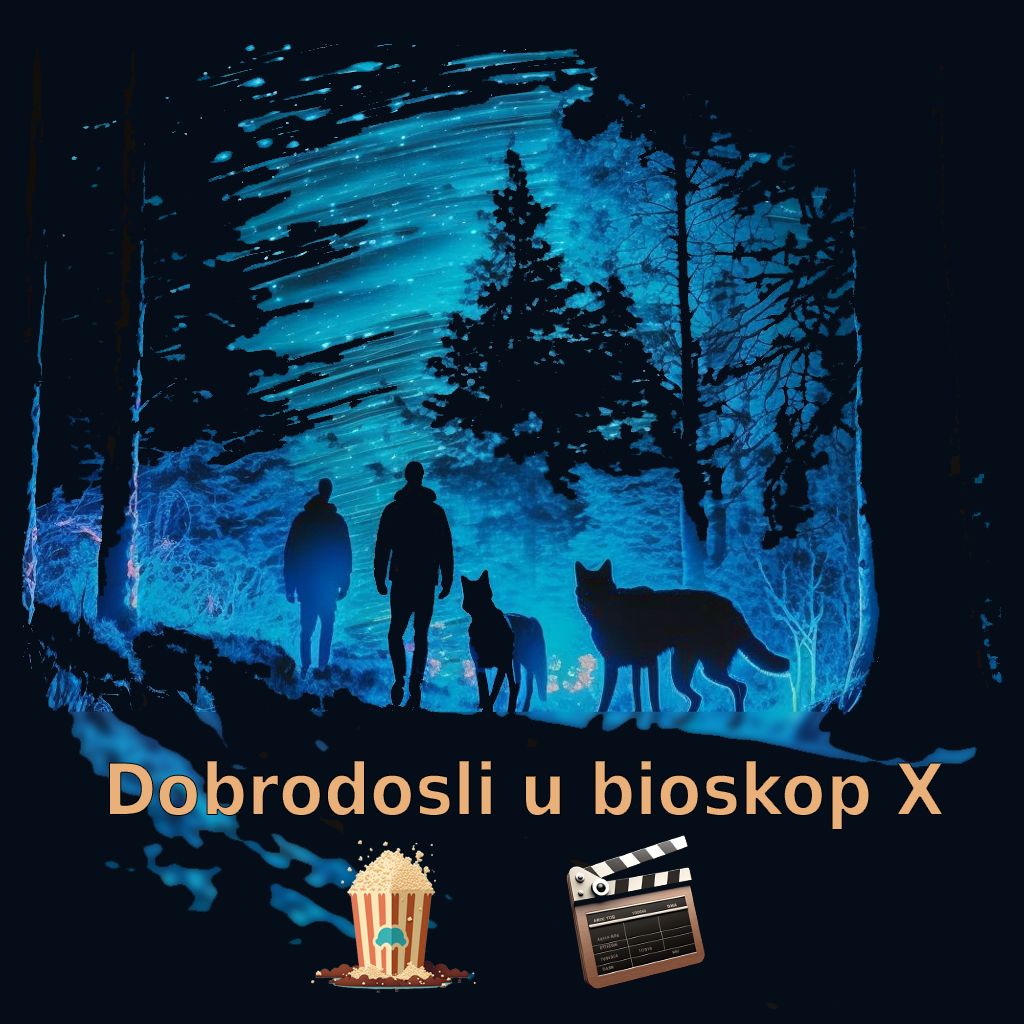
<style>
.page{position:relative;width:1024px;height:1024px;background:#050e18}
.page>*{position:absolute;margin:0}
.t1{font:72px "DejaVuSansCondensed-Bold";color:#e9b07a}
</style>
<div class="page">
<p class="t1" style="left:109px;top:760px;width:835px;height:70px">Dobrodosli u bioskop X</p>
</div>
